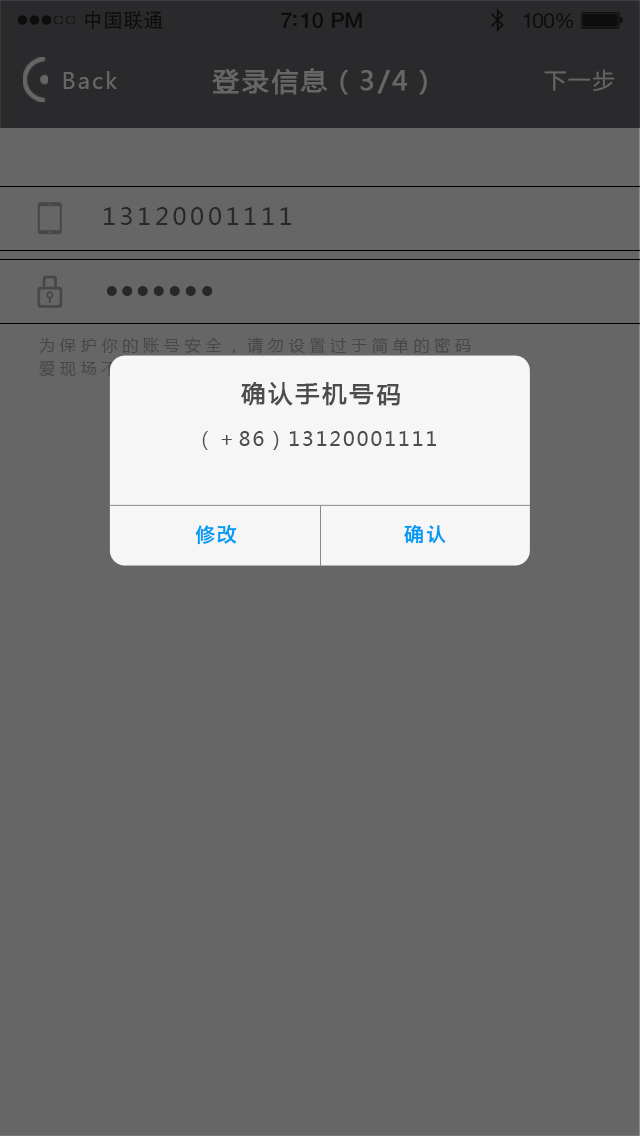
<style>
.page{position:relative;width:640px;height:1136px;background:#666666}
.page>*{position:absolute;margin:0}
.t1{font:19.7px "AdobeHeitiStd-Regular";letter-spacing:0.02em;color:#000000}
.t2{font:21.4px "HelveticaNeue-Medium";letter-spacing:-0.02em;color:#000000}
.t3{font:20.6px "HelveticaNeue";letter-spacing:-0.02em;color:#010101}
.t4{font:22px "MicrosoftYaHei";letter-spacing:0.1em;color:#666666}
.t5{font:26px "MicrosoftYaHei";letter-spacing:0.1em;color:#666666;font-weight:bold}
.t6{font:24px "MicrosoftYaHei";letter-spacing:0.15em;color:#292828}
.t7{font:24px "MicrosoftYaHei";letter-spacing:0.1em;color:#4c4c4c;font-weight:bold}
.t8{font:20px "MicrosoftYaHei";letter-spacing:0.1em;color:#4c4c4c}
.t9{font:20px "HiraginoSansGB-W6";letter-spacing:0.1em;color:#019bf4}
</style>
<div class="page">
<p class="t1" style="left:85px;top:10px;width:78px;height:20px">中国联通</p>
<p class="t2" style="left:281px;top:12px;width:81px;height:16px">7:10 PM</p>
<p class="t3" style="left:523px;top:13px;width:50px;height:16px">100%</p>
<p class="t4" style="left:63px;top:71px;width:55px;height:18px">Back</p>
<p class="t5" style="left:212px;top:68px;width:215px;height:27px">登录信息（3/4）</p>
<p class="t4" style="left:544px;top:69px;width:71px;height:23px">下一步</p>
<p class="t6" style="left:104px;top:207px;width:188px;height:18px">13120001111</p>
<p class="t7" style="left:241px;top:382px;width:159px;height:24px">确认手机号码</p>
<p class="t8" style="left:202px;top:431px;width:235px;height:19px">（＋86）13120001111</p>
<p class="t9" style="left:195px;top:524px;width:42px;height:21px">修改</p>
<p class="t9" style="left:404px;top:525px;width:42px;height:19px">确认</p>
</div>
